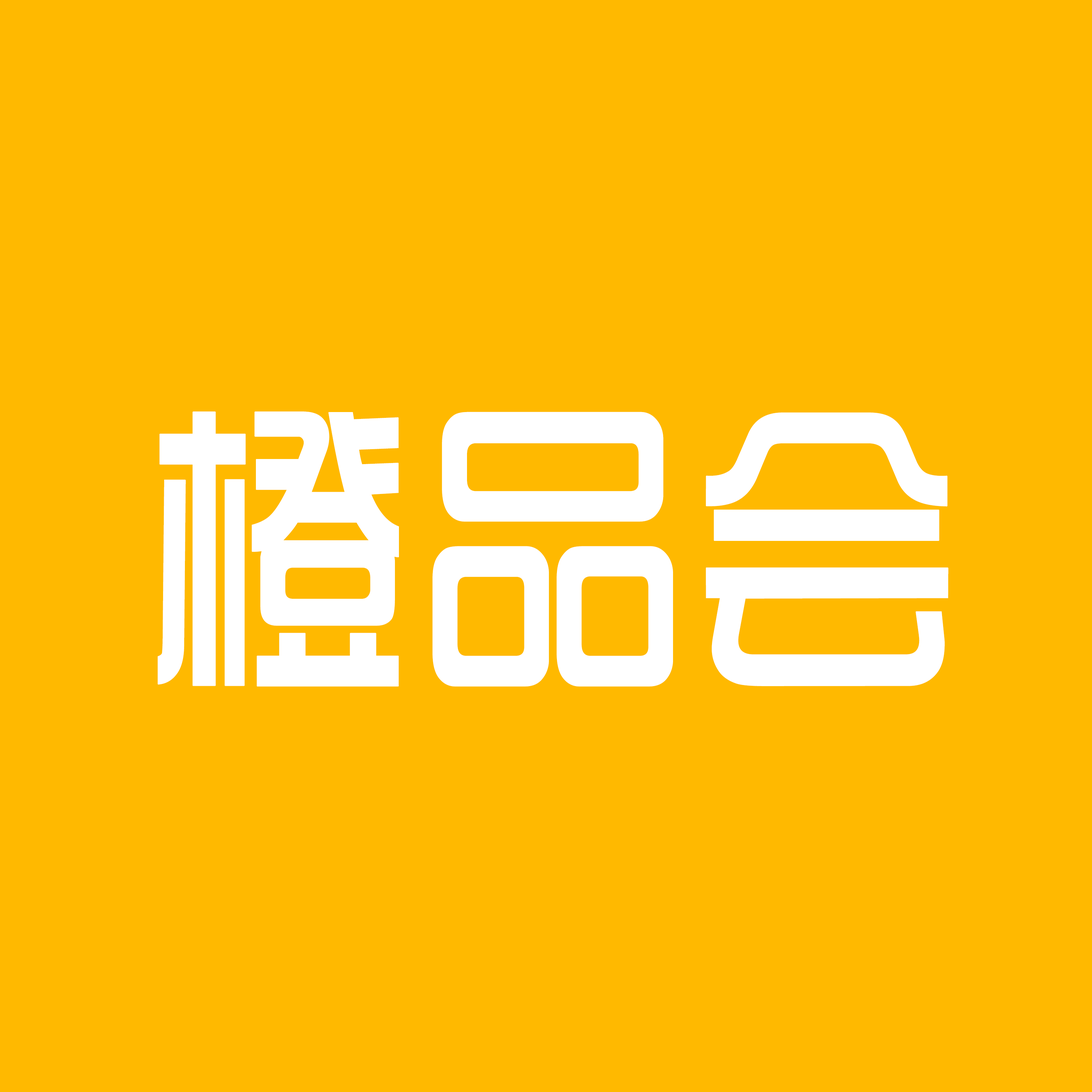
<style>
.page{position:relative;width:1092px;height:1092px;background:#ffb900}
.page>*{position:absolute;margin:0}
.t1{font:330.1px "TRENDS";color:#ffffff;font-weight:bold;scale:0.81 1}
</style>
<div class="page">
<p class="t1" style="left:158px;top:411px;width:791px;height:275px">橙品会</p>
</div>
